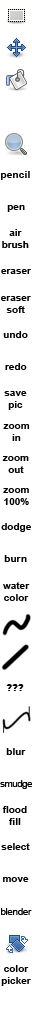
<style>
.page{position:relative;width:32px;height:1024px;background:#ffffff}
.page>*{position:absolute;margin:0}
.t1{font:10px "Arial-BoldMT";letter-spacing:0.02em;color:#000000}
.t2{font:10px "Arial-BoldMT";color:#000000}
.t3{font:10px "Arial-BoldMT";letter-spacing:-0.02em;color:#000000}
.t4{font:10px "ArialMT";letter-spacing:-0.06em;color:#000000}
.t5{font:10px "ArialMT";letter-spacing:-0.04em;color:#000000}
</style>
<div class="page">
<p class="t1" style="left:1px;top:171px;width:29px;height:9px">pencil</p>
<p class="t2" style="left:7px;top:205px;width:18px;height:7px">pen</p>
<p class="t3" style="left:2px;top:229px;width:27px;height:19px;text-align:center"><span class="t2">air<br></span>brush</p>
<p class="t2" style="left:1px;top:269px;width:30px;height:5px">eraser</p>
<p class="t2" style="left:1px;top:296px;width:30px;height:17px;text-align:center">eraser<br>soft</p>
<p class="t2" style="left:3px;top:331px;width:25px;height:7px">undo</p>
<p class="t2" style="left:5px;top:363px;width:22px;height:7px">redo</p>
<p class="t2" style="left:4px;top:391px;width:23px;height:19px;text-align:center">save<br>pic</p>
<p class="t2" style="left:3px;top:424px;width:27px;height:17px;text-align:center">zoom<br>in</p>
<p class="t2" style="left:2px;top:456px;width:27px;height:17px;text-align:center">zoom<br>out</p>
<p class="t2" style="left:3px;top:488px;width:26px;height:17px;text-align:center">zoom<br>100%</p>
<p class="t2" style="left:1px;top:523px;width:30px;height:9px">dodge</p>
<p class="t2" style="left:4px;top:555px;width:23px;height:7px">burn</p>
<p class="t2" style="left:3px;top:582px;width:27px;height:19px;text-align:center">water<br>color</p>
<p class="t2" style="left:6px;top:748px;width:20px;height:7px">blur</p>
<p class="t4" style="left:0px;top:780px;width:33px;height:9px">smudge</p>
<p class="t2" style="left:2px;top:806px;width:25px;height:19px;text-align:center">flood<br>fill</p>
<p class="t2" style="left:1px;top:843px;width:29px;height:7px">select</p>
<p class="t2" style="left:3px;top:877px;width:26px;height:5px">move</p>
<p class="t5" style="left:1px;top:908px;width:31px;height:7px">blender</p>
<p class="t2" style="left:1px;top:965px;width:30px;height:21px;text-align:center">color<br>picker</p>
</div>
